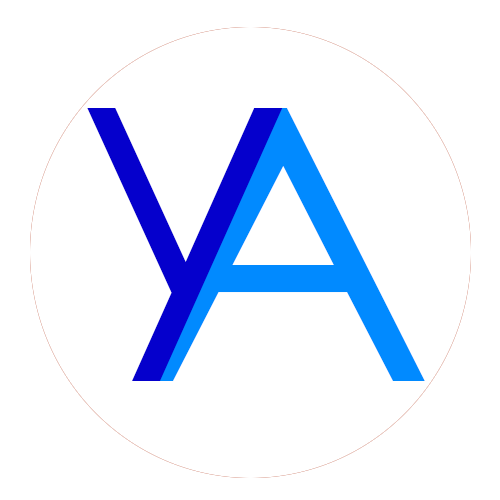
<style>
.page{position:relative;width:500px;height:500px;background:#ffffff}
.page>*{position:absolute;margin:0}
.t1{font:377.5px "CenturyGothic";color:#0500cc}
.t2{font:380.1px "CenturyGothic";color:#018aff;scale:1.08 1}
</style>
<div class="page">
<p class="t1" style="left:87px;top:108px;width:196px;height:273px">y</p>
<p class="t2" style="left:139px;top:108px;width:286px;height:273px">A</p>
</div>
